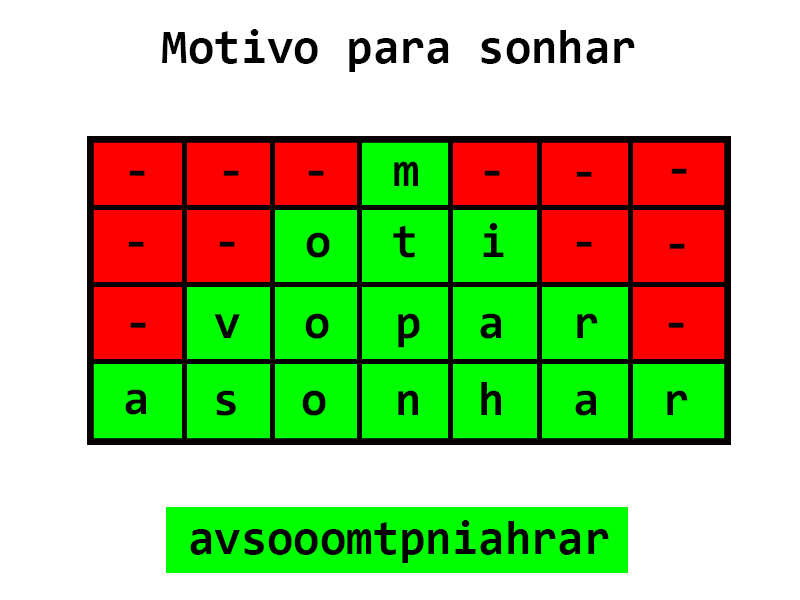
<style>
.page{position:relative;width:800px;height:600px;background:#ffffff}
.page>*{position:absolute;margin:0}
.t1{font:48px "Consolas-Bold";color:#000000}
.t2{font:48.1px "Consolas-Bold";color:#000000}
</style>
<div class="page">
<p class="t1" style="left:162px;top:29px;width:473px;height:43px">Motivo para sonhar</p>
<p class="t2" style="left:394px;top:161px;width:24px;height:25px">m</p>
<p class="t2" style="left:129px;top:170px;width:16px;height:6px">-</p>
<p class="t2" style="left:223px;top:170px;width:16px;height:6px">-</p>
<p class="t2" style="left:308px;top:170px;width:16px;height:6px">-</p>
<p class="t2" style="left:484px;top:170px;width:16px;height:6px">-</p>
<p class="t2" style="left:576px;top:171px;width:16px;height:6px">-</p>
<p class="t2" style="left:671px;top:168px;width:16px;height:6px">-</p>
<p class="t2" style="left:306px;top:232px;width:24px;height:26px">o</p>
<p class="t2" style="left:393px;top:225px;width:22px;height:33px">t</p>
<p class="t2" style="left:483px;top:223px;width:21px;height:34px">i</p>
<p class="t2" style="left:128px;top:241px;width:16px;height:6px">-</p>
<p class="t2" style="left:219px;top:241px;width:16px;height:6px">-</p>
<p class="t2" style="left:576px;top:241px;width:16px;height:6px">-</p>
<p class="t2" style="left:669px;top:243px;width:16px;height:6px">-</p>
<p class="t2" style="left:214px;top:314px;width:26px;height:24px">v</p>
<p class="t2" style="left:305px;top:313px;width:24px;height:26px">o</p>
<p class="t2" style="left:398px;top:313px;width:22px;height:35px">p</p>
<p class="t2" style="left:480px;top:313px;width:21px;height:26px">a</p>
<p class="t2" style="left:577px;top:313px;width:21px;height:25px">r</p>
<p class="t2" style="left:130px;top:322px;width:16px;height:6px">-</p>
<p class="t2" style="left:668px;top:322px;width:16px;height:6px">-</p>
<p class="t2" style="left:125px;top:389px;width:21px;height:26px">a</p>
<p class="t2" style="left:216px;top:390px;width:20px;height:26px">s</p>
<p class="t2" style="left:302px;top:390px;width:24px;height:26px">o</p>
<p class="t2" style="left:398px;top:390px;width:20px;height:25px">n</p>
<p class="t2" style="left:481px;top:382px;width:20px;height:33px">h</p>
<p class="t2" style="left:575px;top:390px;width:21px;height:26px">a</p>
<p class="t2" style="left:667px;top:390px;width:21px;height:25px">r</p>
<p class="t1" style="left:190px;top:520px;width:419px;height:43px">avsooomtpniahrar</p>
</div>
